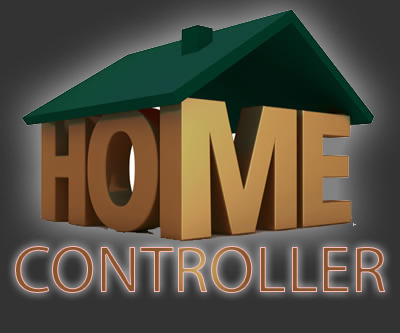
<style>
.page{position:relative;width:400px;height:333px}
.page>*{position:absolute;margin:0}
.t1{font:66.7px "MyriadPro-Regular"}
</style>
<div class="page">
<p class="t1" style="left:15px;top:246px;width:371px;height:47px">CONTROLLER</p>
</div>
